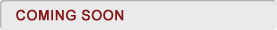
<style>
.page{position:relative;width:277px;height:30px;background:#eaeaea}
.page>*{position:absolute;margin:0}
.t1{font:24px "ArialMT";letter-spacing:0.015em;color:#821518;font-weight:bold}
</style>
<div class="page">
<p class="t1" style="left:16px;top:9px;width:108px;height:12px">COMING SOON</p>
</div>
